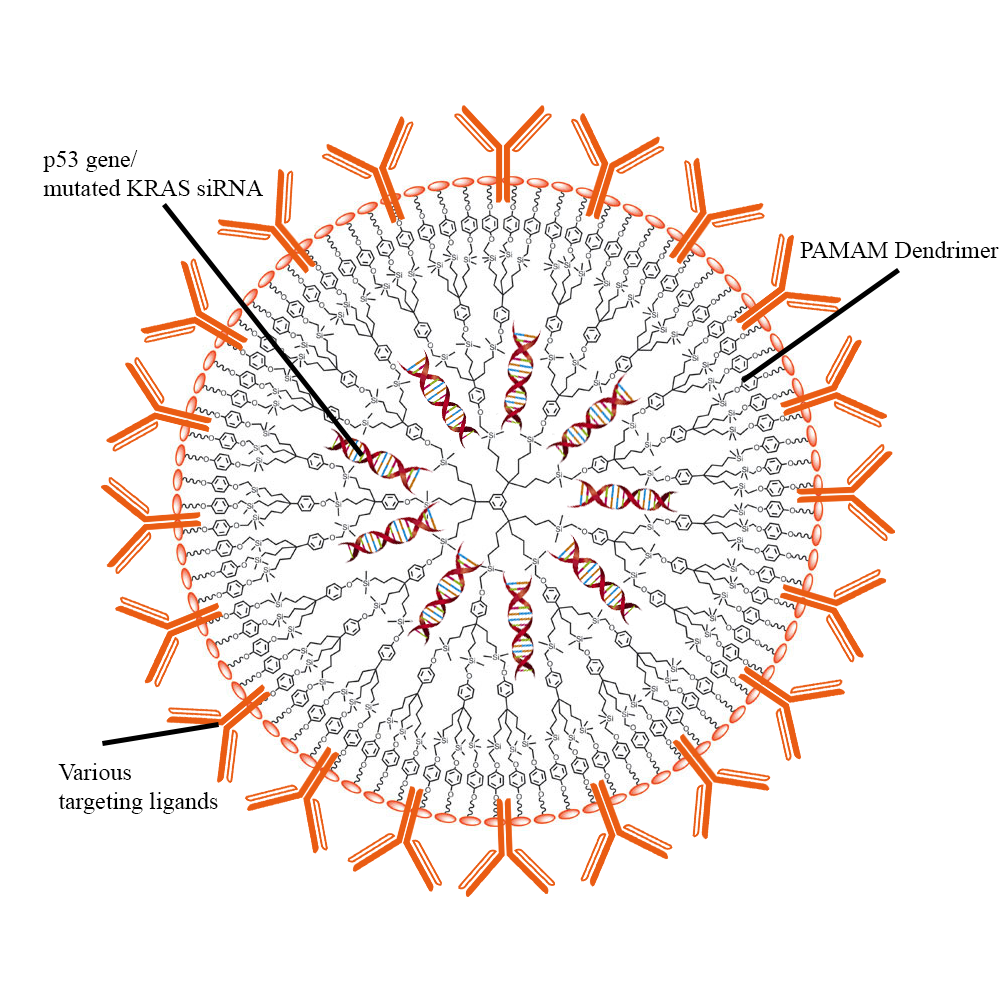
<style>
.page{position:relative;width:1000px;height:1000px;background:#ffffff}
.page>*{position:absolute;margin:0}
.t1{font:24px "TimesNewRomanPSMT";color:#000000}
</style>
<div class="page">
<p class="t1" style="left:43px;top:150px;width:221px;height:47px">p53 gene/<br>mutated KRAS siRNA</p>
<p class="t1" style="left:800px;top:241px;width:199px;height:17px">PAMAM Dendrimer</p>
<p class="t1" style="left:58px;top:763px;width:160px;height:51px">Various<br>targeting ligands</p>
</div>
